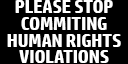
<style>
.page{position:relative;width:128px;height:64px;background:#000000}
.page>*{position:absolute;margin:0}
.t1{font:18px/16.8px "HPSimplified-Bold";letter-spacing:-0.01em;color:#ffffff}
</style>
<div class="page">
<p class="t1" style="left:7px;top:0px;width:114px;height:63px;text-align:center">PLEASE STOP<br>COMMITING<br>HUMAN RIGHTS<br>VIOLATIONS</p>
</div>
